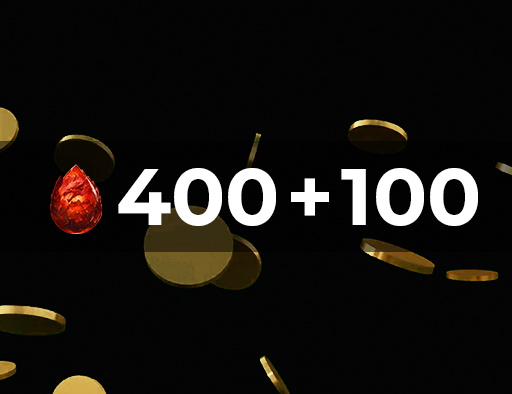
<style>
.page{position:relative;width:512px;height:394px;background:#030403}
.page>*{position:absolute;margin:0}
.t1{font:80px "Montserrat-Bold";color:#ffffff}
</style>
<div class="page">
<p class="t1" style="left:118px;top:168px;width:360px;height:58px">400 + 100</p>
</div>
